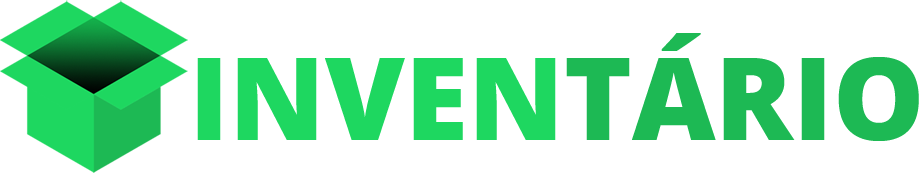
<style>
.page{position:relative;width:920px;height:173px;background:#ffffff}
.page>*{position:absolute;margin:0}
.t1{font:115px "OpenSans-ExtraBold";color:#1ed760}
.t2{font:115px "OpenSans-ExtraBold";color:#1db954}
</style>
<div class="page">
<p class="t1" style="left:197px;top:33px;width:722px;height:108px">INVEN<span class="t2">TÁRIO</span></p>
</div>
